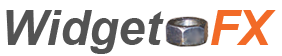
<style>
.page{position:relative;width:282px;height:56px;background:#ffffff}
.page>*{position:absolute;margin:0}
.t1{font:48px "Arial-BoldItalicMT";color:#535353}
.t2{font:48px "Arial-BoldItalicMT";color:#f26a27}
</style>
<div class="page">
<p class="t1" style="left:6px;top:10px;width:158px;height:44px">Widget</p>
<p class="t2" style="left:211px;top:10px;width:65px;height:35px">FX</p>
</div>
